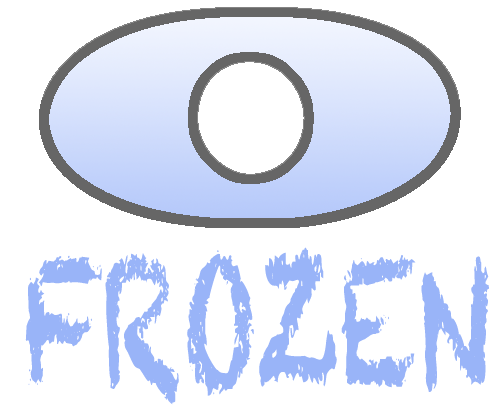
<style>
.page{position:relative;width:496px;height:405px;background:#ffffff}
.page>*{position:absolute;margin:0}
.t1{font:174.8px "Chalkduster";color:#99b4f8;scale:0.59 1}
</style>
<div class="page">
<p class="t1" style="left:25px;top:247px;width:464px;height:158px">FROZEN</p>
</div>
